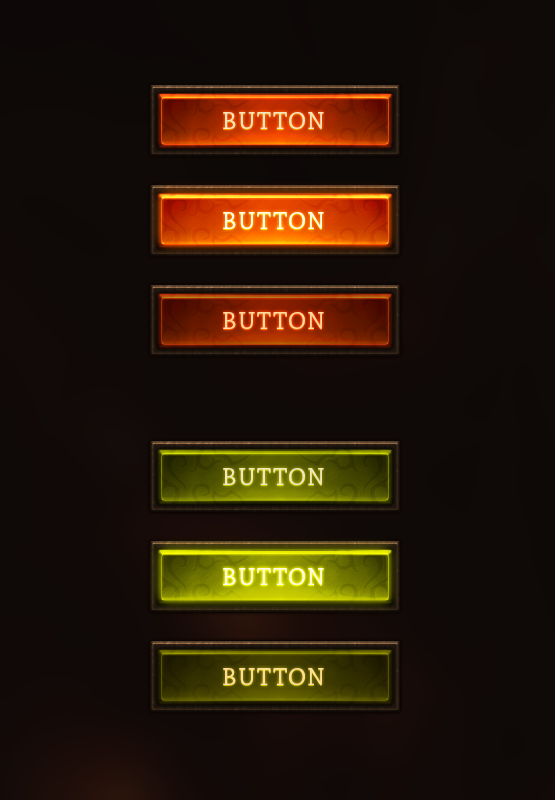
<style>
.page{position:relative;width:555px;height:800px}
.page>*{position:absolute;margin:0}
.t1{font:25px "ChaparralPro-Regular";letter-spacing:0.05em;color:#f4e5bf;text-transform:uppercase}
.t2{font:25px "ChaparralPro-Regular";letter-spacing:0.05em;color:#fffaed;text-transform:uppercase}
.t3{font:25px "ChaparralPro-Regular";letter-spacing:0.05em;color:#ffda9f;text-transform:uppercase}
</style>
<div class="page">
<p class="t1" style="left:223px;top:112px;width:101px;height:17px">button</p>
<p class="t2" style="left:223px;top:212px;width:101px;height:17px">button</p>
<p class="t3" style="left:223px;top:312px;width:101px;height:17px">button</p>
<p class="t1" style="left:223px;top:468px;width:101px;height:17px">button</p>
<p class="t2" style="left:223px;top:568px;width:101px;height:17px">button</p>
<p class="t3" style="left:223px;top:668px;width:101px;height:17px">button</p>
</div>
